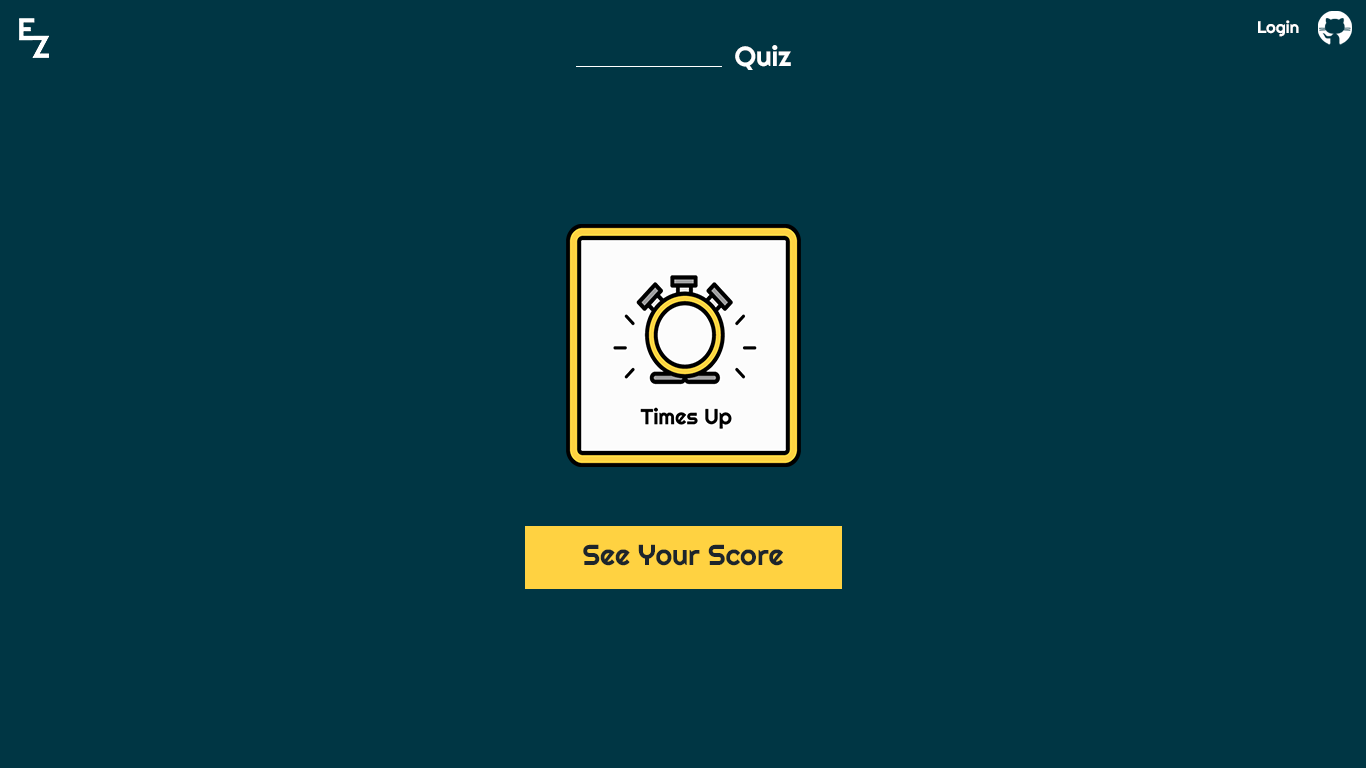
<style>
.page{position:relative;width:1366px;height:768px;background:#003644}
.page>*{position:absolute;margin:0}
.t1{font:16.7px "Righteous-Regular";color:#ffffff}
.t2{font:27.7px "Righteous-Regular";color:#ffffff}
.t3{font:28.7px "Righteous-Regular";color:#1d252c}
</style>
<div class="page">
<p class="t1" style="left:1258px;top:20px;width:41px;height:17px">Login</p>
<p class="t2" style="left:735px;top:45px;width:56px;height:25px">Quiz</p>
<p class="t3" style="left:583px;top:544px;width:200px;height:22px">See Your Score</p>
</div>
